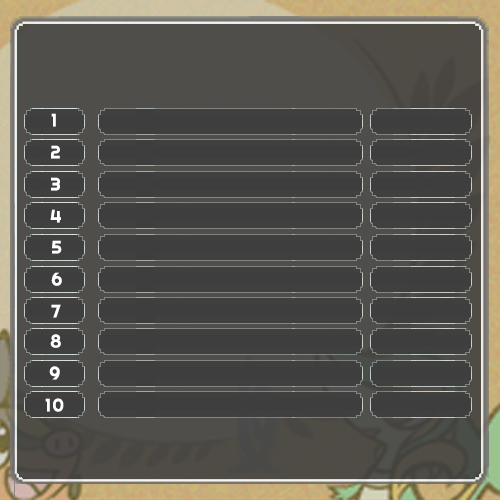
<style>
.page{position:relative;width:500px;height:500px}
.page>*{position:absolute;margin:0}
.t1{font:18px "Righteous-Regular";letter-spacing:0.08em;color:#ffffff}
</style>
<div class="page">
<p class="t1" style="left:51px;top:113px;width:5px;height:14px">1</p>
<p class="t1" style="left:51px;top:145px;width:9px;height:14px">2</p>
<p class="t1" style="left:51px;top:177px;width:9px;height:14px">3</p>
<p class="t1" style="left:50px;top:209px;width:11px;height:14px">4</p>
<p class="t1" style="left:52px;top:240px;width:10px;height:14px">5</p>
<p class="t1" style="left:51px;top:272px;width:11px;height:14px">6</p>
<p class="t1" style="left:51px;top:304px;width:10px;height:14px">7</p>
<p class="t1" style="left:50px;top:334px;width:11px;height:14px">8</p>
<p class="t1" style="left:49px;top:366px;width:11px;height:14px">9</p>
<p class="t1" style="left:45px;top:398px;width:19px;height:14px">10</p>
</div>
